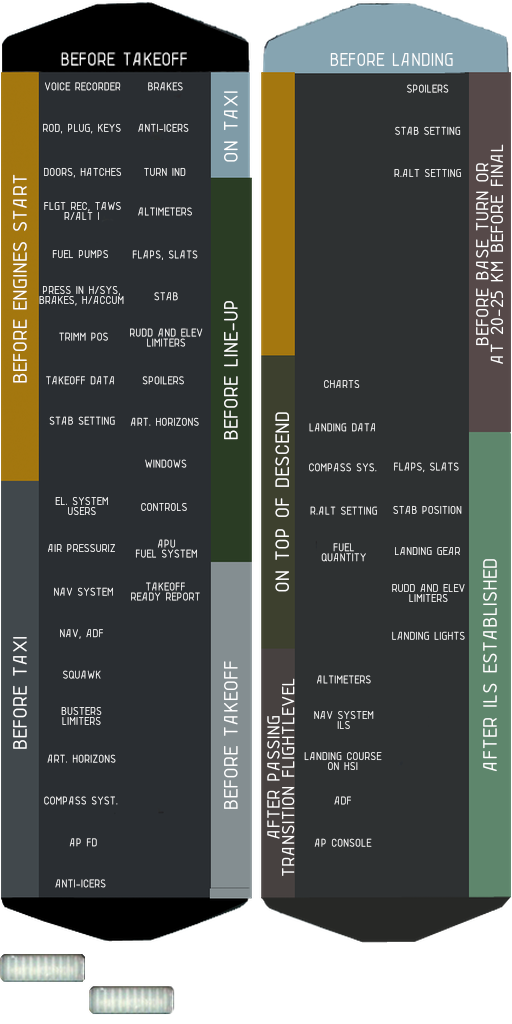
<style>
.page{position:relative;width:512px;height:1024px;background:#2e3132}
.page>*{position:absolute;margin:0}
.t1{font:20px "LENYA69";color:#ffffff;scale:0.94 1}
.t2{font:12.2px "LENYA69";color:#ffffff;scale:0.94 1}
.t3{font:12.2px "LENYA69";scale:0.94 1}
.t4{font:21px "LENYA69";color:#ffffff;scale:1.06 1}
.t5{font:18.9px/14.7px "LENYA69";color:#ffffff;scale:1.06 1}
.t6{font:12.2px/10px "LENYA69";color:#ffffff;scale:0.94 1}
</style>
<div class="page">
<p class="t1" style="left:329px;top:53px;width:125px;height:14px">BEFORE LANDING</p>
<p class="t2" style="left:43px;top:82px;width:79px;height:10px">VOICE RECORDER</p>
<p class="t2" style="left:147px;top:82px;width:37px;height:10px">BRAKES</p>
<p class="t3" style="left:406px;top:84px;width:44px;height:10px">SPOILERS</p>
<p class="t4" style="left:223px;top:91px;width:16px;height:72px;rotate:-90deg">ON TAXI</p>
<p class="t3" style="left:42px;top:123px;width:80px;height:12px">ROD, PLUG, KEYS</p>
<p class="t3" style="left:137px;top:123px;width:53px;height:10px">ANTI-ICERS</p>
<p class="t2" style="left:394px;top:126px;width:68px;height:10px">STAB SETTING</p>
<p class="t5" style="left:475px;top:144px;width:30px;height:221px;text-align:center;rotate:-90deg">BEFORE BASE TURN OR<br>AT 20-25 KM BEFORE FINAL</p>
<p class="t4" style="left:12px;top:174px;width:16px;height:210px;rotate:-90deg">BEFORE ENGINES START</p>
<p class="t2" style="left:43px;top:167px;width:80px;height:12px">DOORS, HATCHES</p>
<p class="t2" style="left:143px;top:167px;width:44px;height:10px">TURN IND</p>
<p class="t2" style="left:393px;top:169px;width:69px;height:9px">R.ALT SETTING</p>
<p class="t6" style="left:43px;top:202px;width:79px;height:19px;text-align:center">FLGT REC, TAWS<br>R/ALT 1</p>
<p class="t3" style="left:137px;top:207px;width:56px;height:10px">ALTIMETERS</p>
<p class="t2" style="left:51px;top:250px;width:58px;height:10px">FUEL PUMPS</p>
<p class="t2" style="left:131px;top:250px;width:68px;height:11px">FLAPS, SLATS</p>
<p class="t6" style="left:38px;top:286px;width:87px;height:21px;text-align:center">PRESS IN H/SYS,<br>BRAKES, H/ACCUM</p>
<p class="t2" style="left:153px;top:292px;width:26px;height:9px">STAB</p>
<p class="t4" style="left:223px;top:301px;width:16px;height:140px;rotate:-90deg">BEFORE LINE-UP</p>
<p class="t6" style="left:129px;top:328px;width:75px;height:20px;text-align:center">RUDD AND ELEV<br>LIMITERS</p>
<p class="t2" style="left:58px;top:332px;width:51px;height:10px">TRIMM POS</p>
<p class="t2" style="left:45px;top:376px;width:70px;height:10px">TAKEOFF DATA</p>
<p class="t3" style="left:141px;top:376px;width:44px;height:10px">SPOILERS</p>
<p class="t3" style="left:323px;top:380px;width:38px;height:9px">CHARTS</p>
<p class="t4" style="left:274px;top:412px;width:16px;height:181px;rotate:-90deg">ON TOP OF DESCEND</p>
<p class="t3" style="left:48px;top:416px;width:68px;height:10px">STAB SETTING</p>
<p class="t3" style="left:129px;top:417px;width:71px;height:10px">ART. HORIZONS</p>
<p class="t2" style="left:308px;top:423px;width:68px;height:10px">LANDING DATA</p>
<p class="t2" style="left:144px;top:459px;width:44px;height:10px">WINDOWS</p>
<p class="t3" style="left:393px;top:462px;width:67px;height:12px">FLAPS, SLATS</p>
<p class="t3" style="left:308px;top:463px;width:70px;height:10px">COMPASS SYS.</p>
<p class="t6" style="left:54px;top:497px;width:55px;height:19px;text-align:center">EL. SYSTEM<br>USERS</p>
<p class="t2" style="left:140px;top:503px;width:48px;height:9px">CONTROLS</p>
<p class="t2" style="left:309px;top:506px;width:69px;height:10px">R.ALT SETTING</p>
<p class="t2" style="left:392px;top:505px;width:71px;height:10px">STAB POSITION</p>
<p class="t2" style="left:46px;top:544px;width:70px;height:9px">AIR PRESSURIZ</p>
<p class="t6" style="left:134px;top:539px;width:64px;height:20px;text-align:center">APU<br>FUEL SYSTEM</p>
<p class="t6" style="left:320px;top:543px;width:47px;height:20px;text-align:center">FUEL<br>QUANTITY</p>
<p class="t2" style="left:394px;top:547px;width:67px;height:9px">LANDING GEAR</p>
<p class="t4" style="left:482px;top:559px;width:16px;height:214px;rotate:-90deg">AFTER ILS ESTABLISHED</p>
<p class="t6" style="left:130px;top:582px;width:71px;height:20px;text-align:center">TAKEOFF<br>READY REPORT</p>
<p class="t2" style="left:53px;top:587px;width:61px;height:10px">NAV SYSTEM</p>
<p class="t6" style="left:391px;top:584px;width:75px;height:19px;text-align:center">RUDD AND ELEV<br>LIMITERS</p>
<p class="t2" style="left:59px;top:629px;width:45px;height:11px">NAV, ADF</p>
<p class="t4" style="left:12px;top:637px;width:16px;height:113px;rotate:-90deg">BEFORE TAXI</p>
<p class="t3" style="left:391px;top:631px;width:75px;height:10px">LANDING LIGHTS</p>
<p class="t4" style="left:223px;top:661px;width:16px;height:148px;rotate:-90deg">BEFORE TAKEOFF</p>
<p class="t2" style="left:62px;top:670px;width:40px;height:10px">SQUAWK</p>
<p class="t5" style="left:266px;top:678px;width:30px;height:199px;text-align:center;rotate:-90deg">AFTER PASSING<br>TRANSITION FLIGHTLEVEL</p>
<p class="t2" style="left:315px;top:675px;width:57px;height:10px">ALTIMETERS</p>
<p class="t6" style="left:60px;top:706px;width:43px;height:20px;text-align:center">BUSTERS<br>LIMITERS</p>
<p class="t6" style="left:313px;top:711px;width:62px;height:19px;text-align:center">NAV SYSTEM<br>ILS</p>
<p class="t2" style="left:46px;top:754px;width:71px;height:10px">ART. HORIZONS</p>
<p class="t6" style="left:303px;top:752px;width:80px;height:20px;text-align:center">LANDING COURSE<br>ON HSI</p>
<p class="t3" style="left:43px;top:796px;width:76px;height:10px">COMPASS SYST.</p>
<p class="t3" style="left:333px;top:796px;width:19px;height:10px">ADF</p>
<p class="t3" style="left:68px;top:838px;width:30px;height:10px">AP FD</p>
<p class="t2" style="left:313px;top:838px;width:60px;height:10px">AP CONSOLE</p>
<p class="t3" style="left:54px;top:879px;width:53px;height:10px">ANTI-ICERS</p>
</div>
